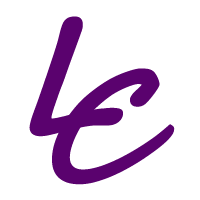
<style>
.page{position:relative;width:200px;height:200px;background:#ffffff}
.page>*{position:absolute;margin:0}
.t1{font:158.3px "SegoeScript-Bold";color:#5a026e;font-style:italic}
.t2{font:150px "SegoeScript-Bold";color:#5a026e;font-style:italic}
</style>
<div class="page">
<p class="t1" style="left:29px;top:16px;width:94px;height:121px">L</p>
<p class="t2" style="left:52px;top:68px;width:123px;height:117px">C</p>
</div>
